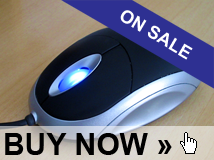
<style>
.page{position:relative;width:214px;height:160px}
.page>*{position:absolute;margin:0}
.t1{font:18px "Arial-BoldMT";color:#ffffff}
.t2{font:30px "Arial-BoldMT";color:#000000}
</style>
<div class="page">
<p class="t1" style="left:120px;top:10px;width:73px;height:50px;rotate:30deg">ON SALE</p>
<p class="t2" style="left:5px;top:133px;width:167px;height:22px">BUY NOW »</p>
</div>
